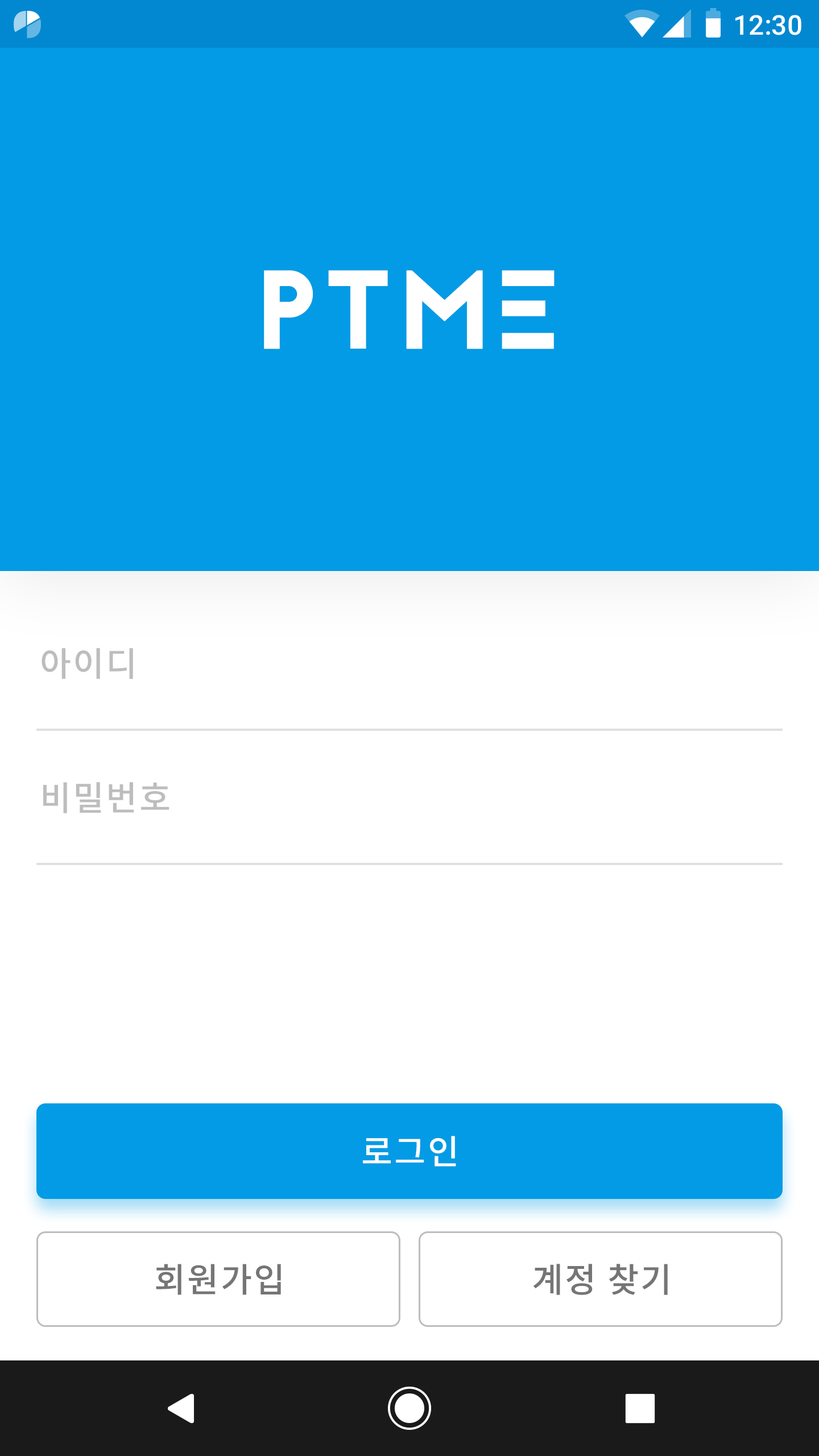
<style>
.page{position:relative;width:819px;height:1456px;background:#ffffff}
.page>*{position:absolute;margin:0}
.t1{font:27.3px "Roboto-Medium";color:#ffffff}
.t2{font:111.5px "Jaapokkisubtract-Regular";letter-spacing:0.05em;color:#ffffff}
.t3{font:34.1px "NotoSansCJKkr-Medium";letter-spacing:0.05em;color:#bdbdbd}
.t4{font:34.1px "NotoSansCJKkr-Medium";letter-spacing:0.05em;color:#ffffff}
.t5{font:34.1px "NotoSansCJKkr-Medium";letter-spacing:0.05em;color:#757575}
</style>
<div class="page">
<p class="t1" style="left:735px;top:15px;width:66px;height:20px">12:30</p>
<p class="t2" style="left:264px;top:270px;width:291px;height:79px">PTME</p>
<p class="t3" style="left:42px;top:648px;width:91px;height:31px">아이디</p>
<p class="t3" style="left:43px;top:782px;width:126px;height:31px">비밀번호</p>
<p class="t4" style="left:363px;top:1136px;width:93px;height:30px">로그인</p>
<p class="t5" style="left:156px;top:1264px;width:125px;height:31px">회원가입</p>
<p class="t5" style="left:533px;top:1264px;width:135px;height:31px">계정 찾기</p>
</div>
